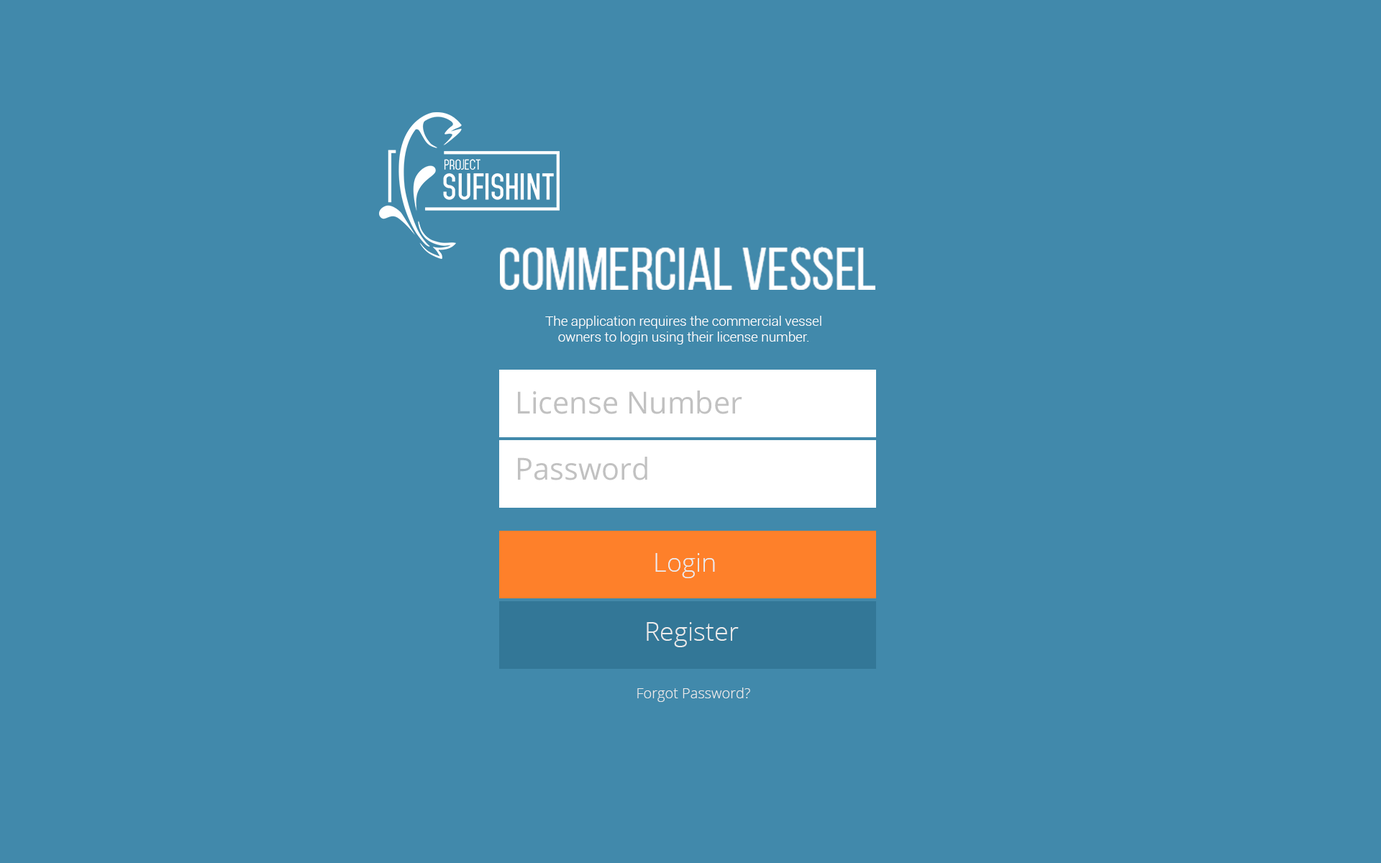
<style>
.page{position:relative;width:1381px;height:863px;background:#4189ab}
.page>*{position:absolute;margin:0}
.t1{font:60.2px "BebasNeueRegular";color:#ffffff}
.t2{font:13.6px/15.4px "Roboto-Light";color:#ffffff}
.t3{font:30.4px "OpenSans";color:#c1c1c1}
.t4{font:25.9px "OpenSans-Light";color:#ebebeb}
.t5{font:14.4px "OpenSans-Light";color:#ebebeb}
</style>
<div class="page">
<p class="t1" style="left:500px;top:247px;width:376px;height:43px">COMMERCIAL VESSEL</p>
<p class="t2" style="left:545px;top:316px;width:277px;height:29px;text-align:center">The application requires the commercial vessel owners to login using their license number.</p>
<p class="t3" style="left:518px;top:391px;width:224px;height:23px">License Number</p>
<p class="t3" style="left:518px;top:457px;width:129px;height:24px">Password</p>
<p class="t4" style="left:655px;top:553px;width:60px;height:25px">Login</p>
<p class="t4" style="left:647px;top:622px;width:92px;height:25px">Register</p>
<p class="t5" style="left:637px;top:688px;width:113px;height:14px">Forgot Password?</p>
</div>
